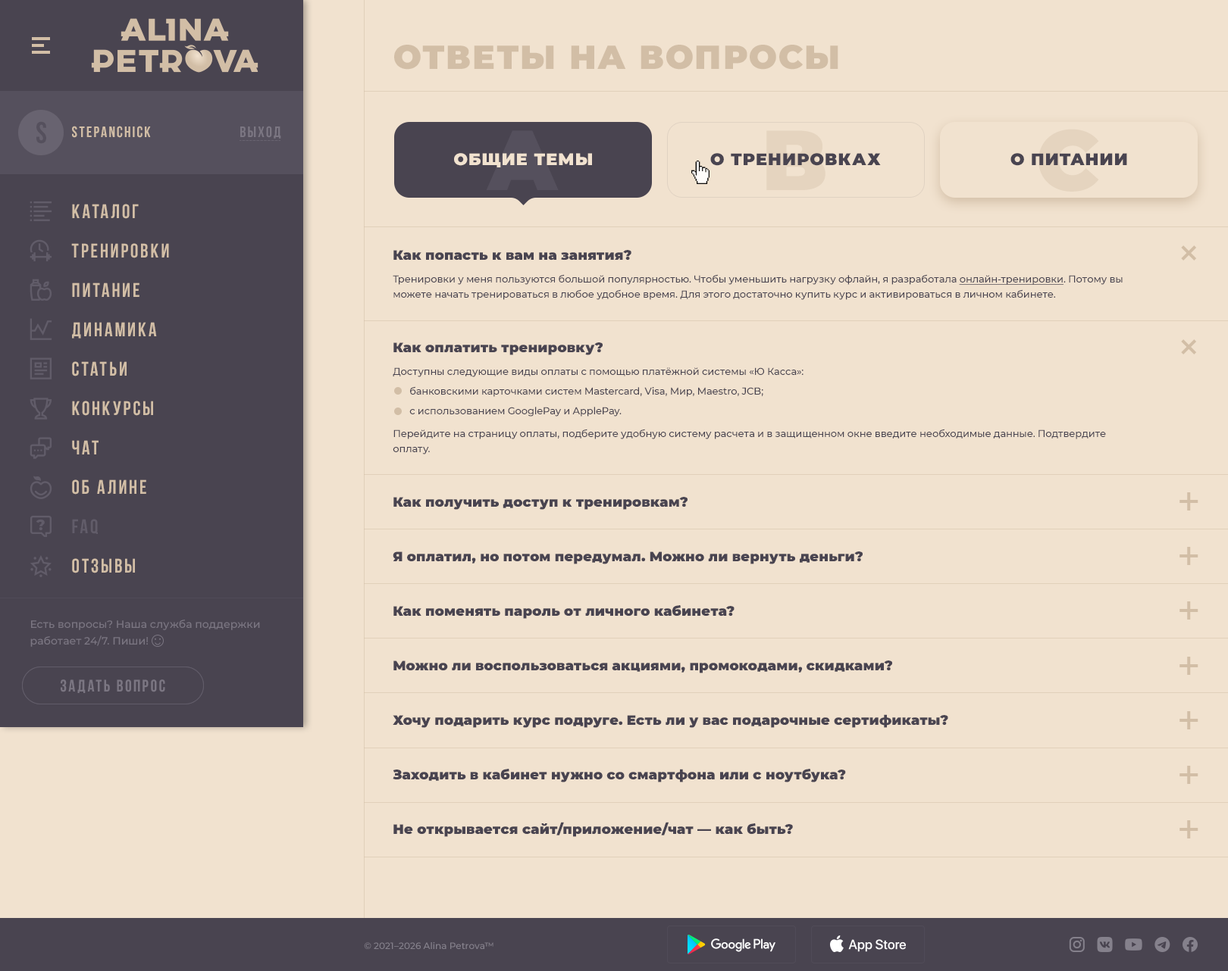
<style>
.page{position:relative;width:1228px;height:971px;background:#f1e2cf}
.page>*{position:absolute;margin:0}
.t1{font:33.3px "Montserrat-Black";letter-spacing:0.05em;color:#d2bea6;text-transform:uppercase}
.t2{font:30.3px "BebasNeueBold";letter-spacing:0.111em;color:#55505d}
.t3{font:15.2px "BebasNeueBold";letter-spacing:0.111em;color:#d2bea6}
.t4{font:15.2px "BebasNeueBold";letter-spacing:0.111em;color:#7b7682}
.t5{font:16.7px "Montserrat-Black";letter-spacing:0.05em;color:#f1e2cf;text-transform:uppercase}
.t6{font:16.7px "Montserrat-Black";letter-spacing:0.05em;color:#494450;text-transform:uppercase}
.t7{font:19.7px/39.4px "BebasNeueBold";letter-spacing:0.111em;color:#d2bea6}
.t8{font:19.7px/39.4px "BebasNeueBold";letter-spacing:0.111em;color:#615c69}
.t9{font:13.6px/19.7px "Montserrat-Black";color:#494450}
.t10{font:9.9px/15.2px "Montserrat-Medium";letter-spacing:-0.01em;color:#494450}
.t11{font:9.9px/15.2px "Montserrat-Medium";letter-spacing:-0.01em;color:#494450;text-decoration:underline}
.t12{font:10.6px/16.7px "Montserrat-Medium";color:#7b7682}
.t13{font:16.7px "BebasNeueBold";letter-spacing:0.111em;color:#7b7682;text-transform:uppercase}
.t14{font:9.1px "Montserrat-Medium";color:#85818c}
</style>
<div class="page">
<p class="t1" style="left:394px;top:45px;width:444px;height:25px">Ответы на вопросы</p>
<p class="t2" style="left:36px;top:121px;width:10px;height:23px">S</p>
<p class="t3" style="left:72px;top:126px;width:79px;height:12px">Stepanchick</p>
<p class="t4" style="left:240px;top:126px;width:41px;height:13px">Выход</p>
<p class="t5" style="left:454px;top:153px;width:138px;height:14px">Общие темы</p>
<p class="t6" style="left:710px;top:153px;width:170px;height:13px">О тренировках</p>
<p class="t6" style="left:1010px;top:153px;width:117px;height:13px">О питании</p>
<p class="t7" style="left:71px;top:204px;width:98px;height:370px">Каталог<br>Тренировки<br>Питание<br>динамика<br>Статьи<br>Конкурсы<br>Чат<br>Об Алине<br><span class="t8">FAQ<br></span>Отзывы</p>
<p class="t9" style="left:393px;top:250px;width:729px;height:587px">Как попасть к вам на занятия?<br><span class="t10">Тренировки у меня пользуются большой популярностью. Чтобы уменьшить нагрузку офлайн, я разработала </span><span class="t11">онлайн-тренировки</span><span class="t10">. Потому вы можете начать тренироваться в любое удобное время. Для этого достаточно купить курс и активироваться в личном кабинете.<br></span>Как оплатить тренировку?<br><span class="t10">Доступны следующие виды оплаты с помощью платёжной системы «Ю Касса»:<br>банковскими карточками систем Mastercard, Visa, Мир, Maestro, JCB;<br>с использованием GooglePay и ApplePay.<br>Перейдите на страницу оплаты, подберите удобную систему расчета и в защищенном окне введите необходимые данные. Подтвердите оплату.<br></span>Как получить доступ к тренировкам?<br>Я оплатил, но потом передумал. Можно ли вернуть деньги?<br>Как поменять пароль от личного кабинета?<br>Можно ли воспользоваться акциями, промокодами, скидками?<br>Хочу подарить курс подруге. Есть ли у вас подарочные сертификаты?<br>Заходить в кабинет нужно со смартфона или с ноутбука?<br>Не открывается сайт/приложение/чат — как быть?</p>
<p class="t12" style="left:30px;top:620px;width:230px;height:27px">Есть вопросы? Наша служба поддержки работает 24/7. Пиши!</p>
<p class="t13" style="left:61px;top:680px;width:104px;height:13px">Задать вопрос</p>
<p class="t13" style="left:61px;top:680px;width:104px;height:13px">Задать вопрос</p>
<p class="t14" style="left:364px;top:942px;width:129px;height:7px">© 2021–2026 Alina Petrova™</p>
</div>
